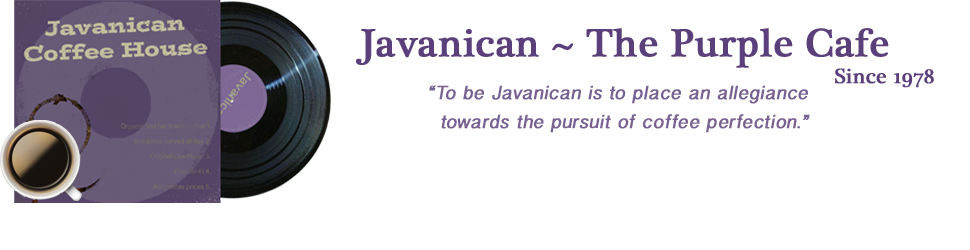
<style>
.page{position:relative;width:970px;height:250px;background:#ffffff}
.page>*{position:absolute;margin:0}
.t1{font:40px "PlantagenetCherokee";color:#5b3f7b;font-weight:bold}
.t2{font:21.3px "PlantagenetCherokee";color:#5b3f7b;font-weight:bold}
.t3{font:24px "SinhalaSangamMN";color:#776191;font-weight:bold;font-style:italic}
</style>
<div class="page">
<p class="t1" style="left:356px;top:28px;width:533px;height:40px">Javanican ~ The Purple Cafe</p>
<p class="t2" style="left:835px;top:68px;width:99px;height:20px">Since 1978</p>
<p class="t3" style="left:429px;top:85px;width:381px;height:48px;text-align:right">“To be Javanican is to place an allegiance<br> towards the pursuit of coffee perfection.”</p>
</div>
